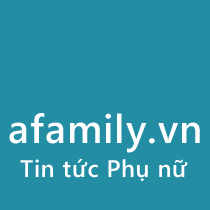
<style>
.page{position:relative;width:210px;height:210px;background:#238da3}
.page>*{position:absolute;margin:0}
.t1{font:40px "SegoeWP-Semibold";letter-spacing:0.025em;color:#ffffff}
.t2{font:24px "SegoeWP-Semibold";letter-spacing:0.025em;color:#ffffff}
</style>
<div class="page">
<p class="t1" style="left:9px;top:113px;width:191px;height:40px">afamily.vn</p>
<p class="t2" style="left:20px;top:159px;width:168px;height:22px">Tin tức Phụ nữ</p>
</div>
